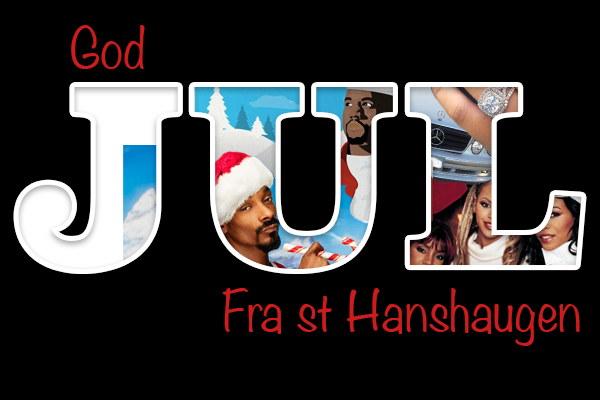
<style>
.page{position:relative;width:600px;height:400px;background:#000000}
.page>*{position:absolute;margin:0}
.t1{font:50px "Noteworthy-Light";color:#cb1d1d}
.t2{font:239px "Superclarendon-Black"}
</style>
<div class="page">
<p class="t1" style="left:71px;top:25px;width:74px;height:44px">God</p>
<p class="t2" style="left:18px;top:87px;width:564px;height:182px">JUL</p>
<p class="t1" style="left:222px;top:288px;width:358px;height:58px">Fra st Hanshaugen</p>
</div>
